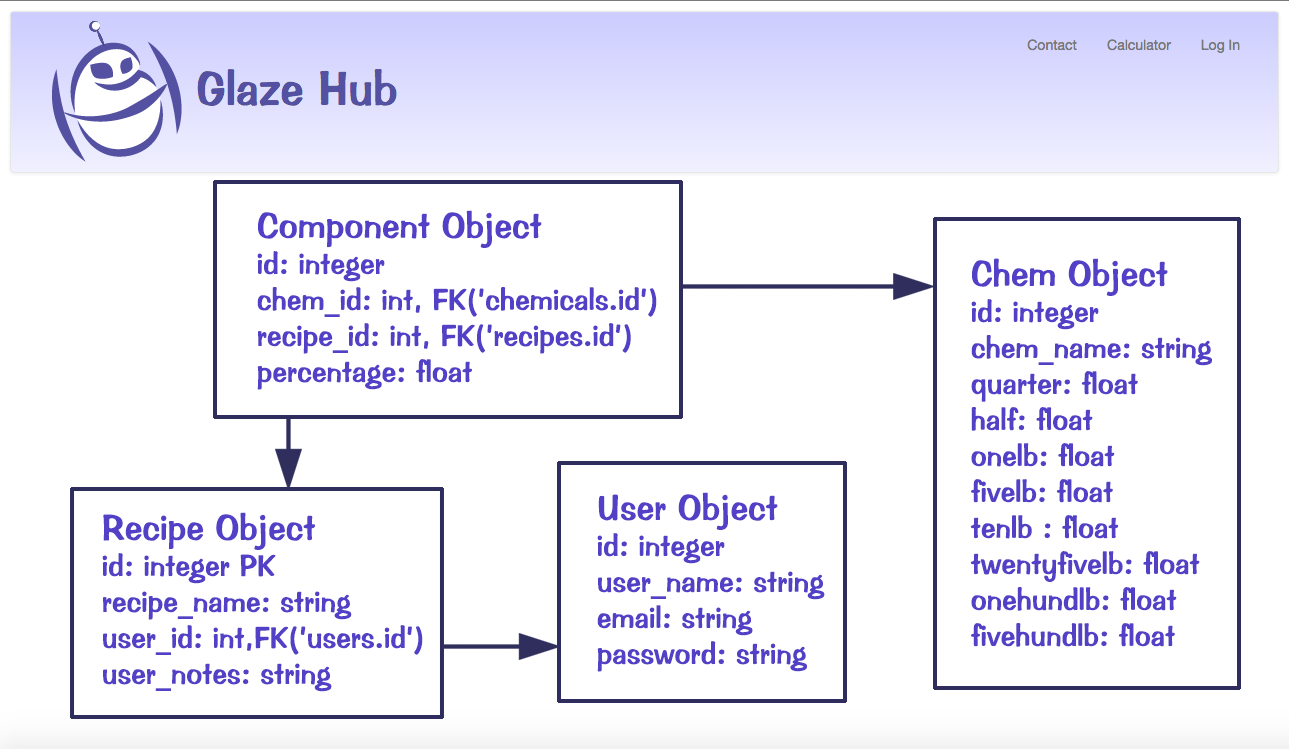
<style>
.page{position:relative;width:1289px;height:749px;background:#ffffff}
.page>*{position:absolute;margin:0}
.t1{font:30px "ImpressBT-Regular";color:#5240c6}
.t2{font:36px "ImpressBT-Regular";color:#5240c6}
</style>
<div class="page">
<p class="t1" style="left:257px;top:210px;width:400px;height:180px"><span class="t2">Component Object<br></span>id: integer<br>chem_id: int, FK(’chemicals.id’)<br>recipe_id: int, FK(’recipes.id’)<br>percentage: float</p>
<p class="t1" style="left:970px;top:258px;width:242px;height:389px"><span class="t2">Chem Object<br></span>id: integer<br>chem_name: string<br>quarter: float<br>half: float<br>onelb: float<br>fivelb: float<br>tenlb : float<br>twentyfivelb: float<br>onehundlb: float<br>fivehundlb: float</p>
<p class="t1" style="left:597px;top:492px;width:228px;height:180px"><span class="t2">User Object<br></span>id: integer<br>user_name: string<br>email: string<br>password: string</p>
<p class="t1" style="left:102px;top:512px;width:321px;height:180px"><span class="t2">Recipe Object<br></span>id: integer PK<br>recipe_name: string<br>user_id: int,FK(’users.id’)<br>user_notes: string</p>
</div>
